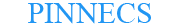
<style>
.page{position:relative;width:180px;height:26px;background:#ffffff}
.page>*{position:absolute;margin:0}
.t1{font:30px "TimesNewRomanPSMT";color:#2196f3}
</style>
<div class="page">
<p class="t1" style="left:28px;top:3px;width:123px;height:21px">PINNECS</p>
</div>
